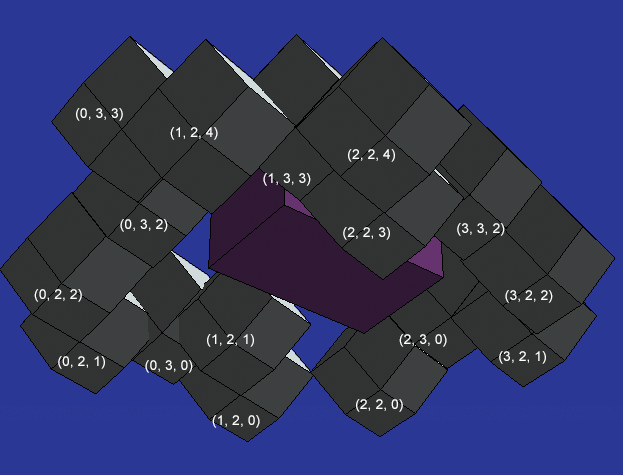
<style>
.page{position:relative;width:623px;height:475px;background:#2b3794}
.page>*{position:absolute;margin:0}
.t1{font:14px "ArialMT";color:#ffffff}
</style>
<div class="page">
<p class="t1" style="left:76px;top:108px;width:47px;height:13px">(0, 3, 3)</p>
<p class="t1" style="left:170px;top:127px;width:48px;height:13px">(1, 2, 4)</p>
<p class="t1" style="left:348px;top:149px;width:47px;height:13px">(2, 2, 4)</p>
<p class="t1" style="left:263px;top:173px;width:48px;height:13px">(1, 3, 3)</p>
<p class="t1" style="left:120px;top:219px;width:48px;height:13px">(0, 3, 2)</p>
<p class="t1" style="left:343px;top:227px;width:47px;height:13px">(2, 2, 3)</p>
<p class="t1" style="left:457px;top:223px;width:48px;height:13px">(3, 3, 2)</p>
<p class="t1" style="left:34px;top:289px;width:48px;height:13px">(0, 2, 2)</p>
<p class="t1" style="left:505px;top:290px;width:48px;height:13px">(3, 2, 2)</p>
<p class="t1" style="left:207px;top:334px;width:47px;height:13px">(1, 2, 1)</p>
<p class="t1" style="left:399px;top:334px;width:48px;height:13px">(2, 3, 0)</p>
<p class="t1" style="left:499px;top:351px;width:47px;height:13px">(3, 2, 1)</p>
<p class="t1" style="left:58px;top:356px;width:47px;height:13px">(0, 2, 1)</p>
<p class="t1" style="left:145px;top:360px;width:48px;height:13px">(0, 3, 0)</p>
<p class="t1" style="left:356px;top:399px;width:47px;height:13px">(2, 2, 0)</p>
<p class="t1" style="left:212px;top:415px;width:48px;height:13px">(1, 2, 0)</p>
</div>
